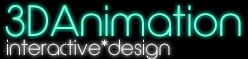
<style>
.page{position:relative;width:248px;height:59px;background:#000000}
.page>*{position:absolute;margin:0}
.t1{font:41.3px "Quinfo";letter-spacing:0.025em;color:#8af8d8}
.t2{font:20.6px "Quinfo";letter-spacing:0.025em;color:#f8f8f8}
</style>
<div class="page">
<p class="t1" style="left:5px;top:5px;width:236px;height:32px">3DAnimation</p>
<p class="t2" style="left:7px;top:39px;width:163px;height:21px">interactive*design</p>
</div>
